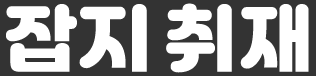
<style>
.page{position:relative;width:316px;height:76px;background:#333333}
.page>*{position:absolute;margin:0}
.t1{font:72px "Jalnan";letter-spacing:0.05em;color:#ffffff;text-transform:uppercase}
</style>
<div class="page">
<p class="t1" style="left:6px;top:3px;width:303px;height:70px">잡지 취재</p>
</div>
